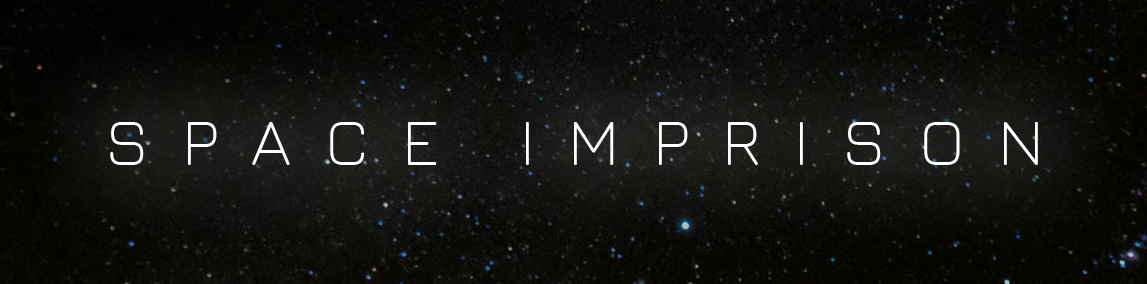
<style>
.page{position:relative;width:1147px;height:284px}
.page>*{position:absolute;margin:0}
.t1{font:66.7px "Jura-Light";letter-spacing:0.5em;color:#ffffff}
</style>
<div class="page">
<p class="t1" style="left:110px;top:122px;width:928px;height:43px">SPACE IMPRISON</p>
</div>
